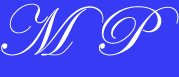
<style>
.page{position:relative;width:179px;height:77px;background:#373bf4}
.page>*{position:absolute;margin:0}
.t1{font:72px "EdwardianScriptITC";color:#ffffff}
</style>
<div class="page">
<p class="t1" style="left:1px;top:3px;width:178px;height:53px">M  P</p>
</div>
